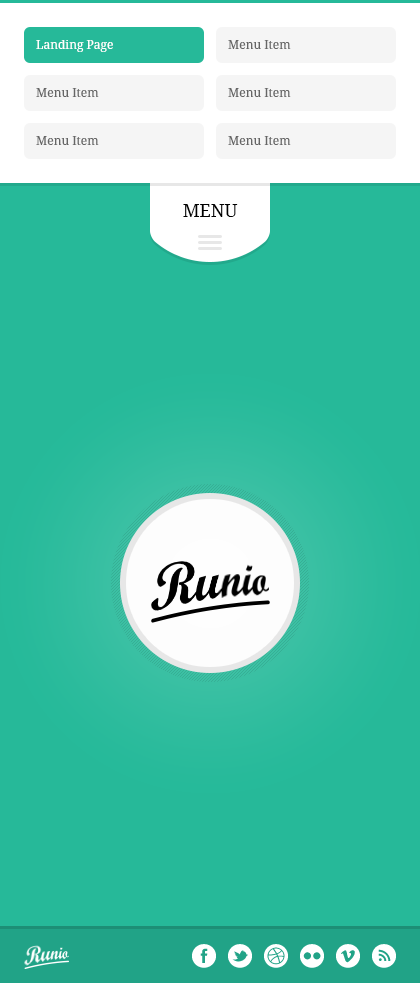
<style>
.page{position:relative;width:420px;height:983px;background:#26b999}
.page>*{position:absolute;margin:0}
.t1{font:12px "DroidSerif";color:#666666}
.t2{font:18px "DroidSerif";color:#000000}
</style>
<div class="page">
<p class="t1" style="left:228px;top:40px;width:63px;height:9px">Menu Item</p>
<p class="t1" style="left:36px;top:88px;width:63px;height:9px">Menu Item</p>
<p class="t1" style="left:228px;top:88px;width:63px;height:9px">Menu Item</p>
<p class="t1" style="left:36px;top:136px;width:63px;height:9px">Menu Item</p>
<p class="t1" style="left:228px;top:136px;width:63px;height:9px">Menu Item</p>
<p class="t2" style="left:183px;top:204px;width:55px;height:13px">MENU</p>
</div>
